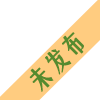
<style>
.page{position:relative;width:100px;height:100px;background:#ffffff}
.page>*{position:absolute;margin:0}
.t1{font:24px "FZYTK--GBK1-0";letter-spacing:-0.05em;color:#558b2f;font-weight:bold}
</style>
<div class="page">
<p class="t1" style="left:29px;top:32px;width:55px;height:60px;rotate:-45deg">未发布</p>
</div>
